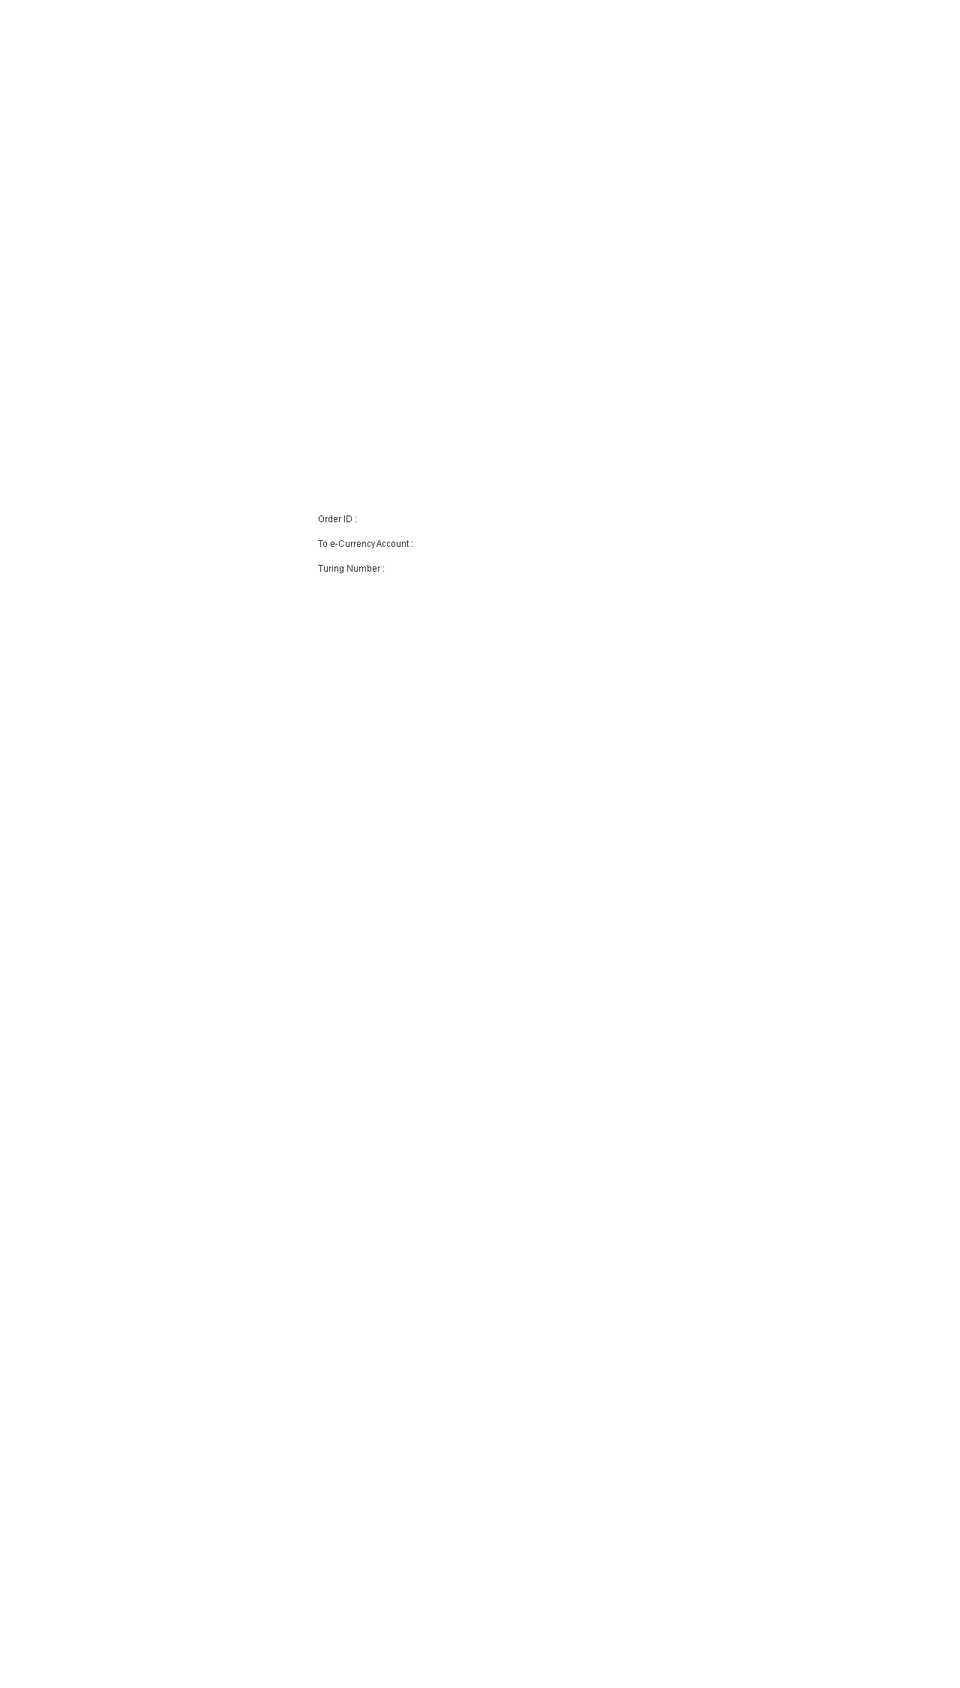
<style>
.page{position:relative;width:960px;height:1688px;background:#ffffff}
.page>*{position:absolute;margin:0}
.t1{font:9px/24.8px "ArialMT";color:#303030}
</style>
<div class="page">
<p class="t1" style="left:318px;top:515px;width:94px;height:58px">Order ID :  <br>To e-Currency Account :  <br>Turing Number :</p>
</div>
